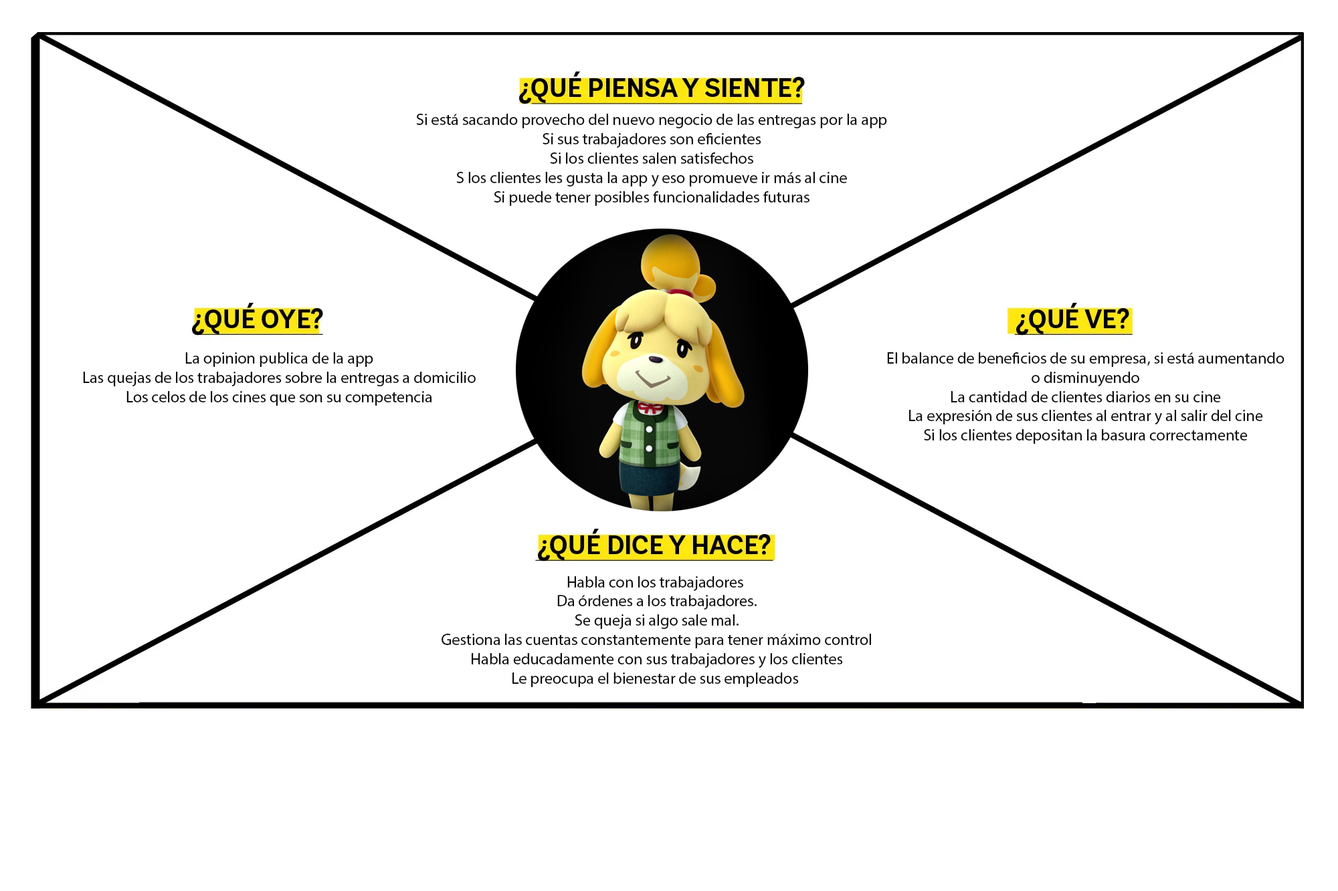
<style>
.page{position:relative;width:1338px;height:891px;background:#ffffff}
.page>*{position:absolute;margin:0}
.t1{font:16.1px "MyriadPro-Regular";color:#000000}
</style>
<div class="page">
<p class="t1" style="left:416px;top:114px;width:471px;height:92px;text-align:center">Si está sacando provecho del nuevo negocio de las entregas por la app<br>Si sus trabajadores son eficientes<br>Si los clientes salen satisfechos<br>S los clientes les gusta la app y eso promueve ir más al cine<br>Si puede tener posibles funcionalidades futuras</p>
<p class="t1" style="left:83px;top:352px;width:393px;height:54px;text-align:center">La opinion publica de la app<br>Las quejas de los trabajadores sobre la entregas a domicilio<br>Los celos de los cines que son su competencia</p>
<p class="t1" style="left:887px;top:352px;width:397px;height:92px;text-align:center">El balance de beneficios de su empresa, si está aumentando<br>o disminuyendo<br>La cantidad de clientes diarios en su cine<br>La expresión de sus clientes al entrar y al salir del cine<br>Si los clientes depositan la basura correctamente</p>
<p class="t1" style="left:441px;top:576px;width:430px;height:112px;text-align:center">Habla con los trabajadores <br>Da órdenes a los trabajadores.<br>Se queja si algo sale mal.<br>Gestiona las cuentas constantemente para tener máximo control<br>Habla educadamente con sus trabajadores y los clientes<br>Le preocupa el bienestar de sus empleados</p>
</div>
